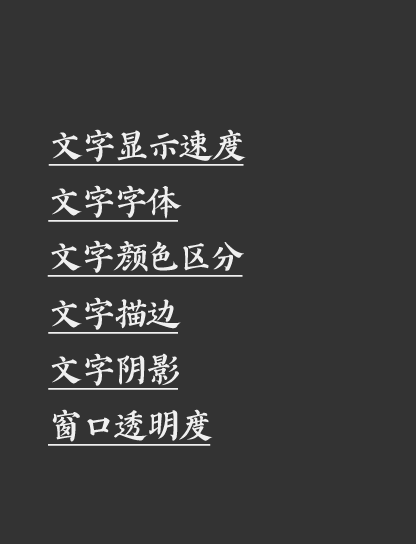
<style>
.page{position:relative;width:416px;height:544px;background:#333333}
.page>*{position:absolute;margin:0}
.t1{font:36px "AaYZQDBTBNon-CommercialUse";letter-spacing:-0.1em;color:#f0f0f0;text-decoration:underline}
</style>
<div class="page">
<p class="t1" style="left:48px;top:129px;width:198px;height:37px">文字显示速度</p>
<p class="t1" style="left:48px;top:185px;width:134px;height:37px">文字字体</p>
<p class="t1" style="left:47px;top:240px;width:197px;height:37px">文字颜色区分</p>
<p class="t1" style="left:48px;top:297px;width:133px;height:37px">文字描边</p>
<p class="t1" style="left:48px;top:353px;width:131px;height:37px">文字阴影</p>
<p class="t1" style="left:48px;top:409px;width:165px;height:37px">窗口透明度</p>
</div>
